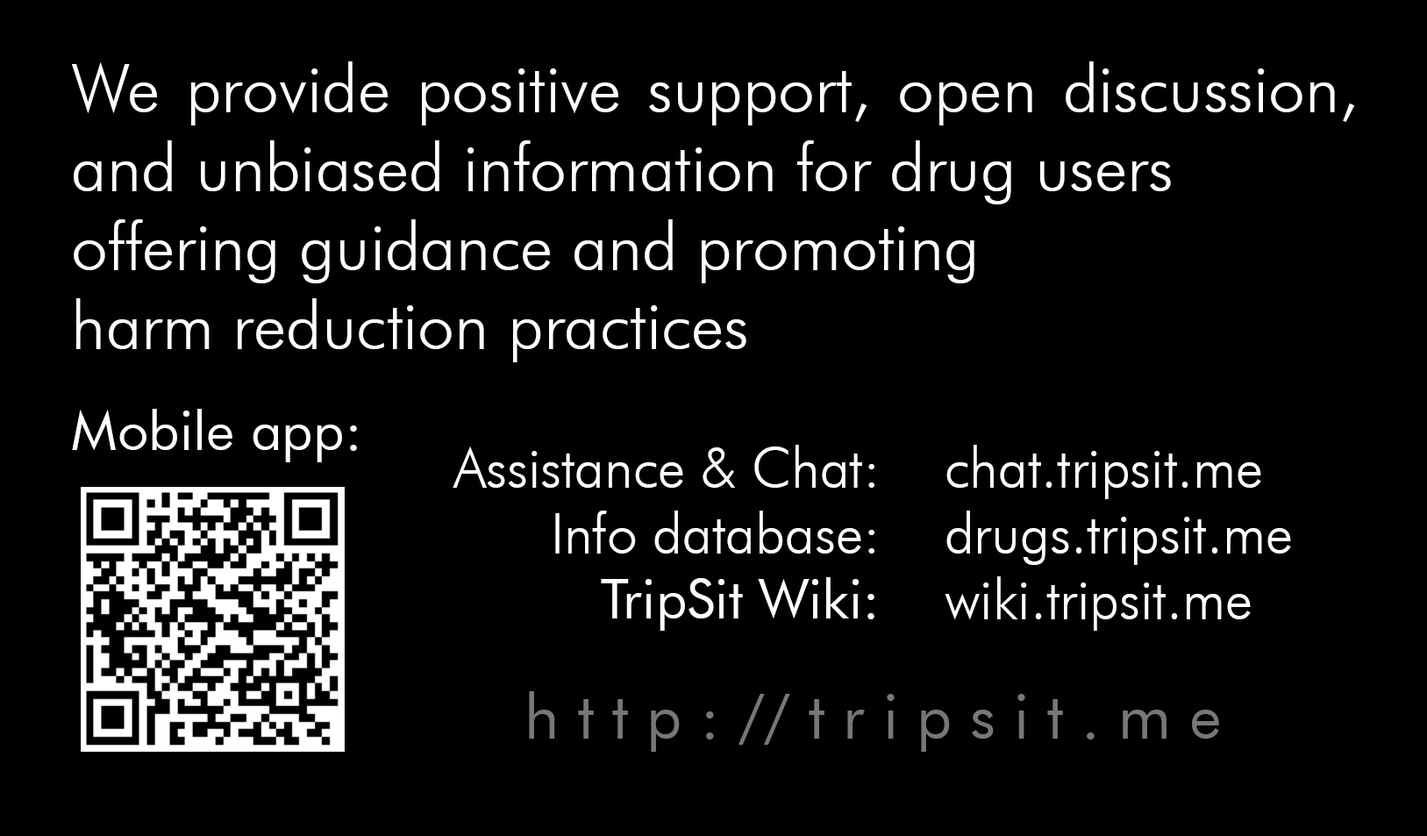
<style>
.page{position:relative;width:1427px;height:836px;background:#000000}
.page>*{position:absolute;margin:0}
.t1{font:65.8px "FuturaOblique";color:#ffffff}
.t2{font:54.8px "FuturaBT-Book";color:#ffffff}
.t3{font:54.8px "FuturaOblique";color:#ffffff}
.t4{font:62.1px "FuturaBT-Book";color:#76777b}
</style>
<div class="page">
<p class="t1" style="left:72px;top:61px;width:1283px;height:301px;text-align:justify">,We provide positive support, open discussion and unbiased information for drug users<br>offering guidance and promoting <br>harm reduction practices</p>
<p class="t2" style="left:72px;top:409px;width:285px;height:53px">:Mobile app</p>
<p class="t3" style="left:453px;top:445px;width:421px;height:186px">:Assistance &amp; Chat<br>:Info database<br><span class="t2">:TripSit Wiki</span></p>
<p class="t3" style="left:944px;top:445px;width:347px;height:186px;text-align:right">chat.tripsit.me<br>drugs.tripsit.me<br>wiki.tripsit.me</p>
<p class="t4" style="left:529px;top:691px;width:690px;height:61px">h t t p : // t r i p s i t . m e</p>
</div>
